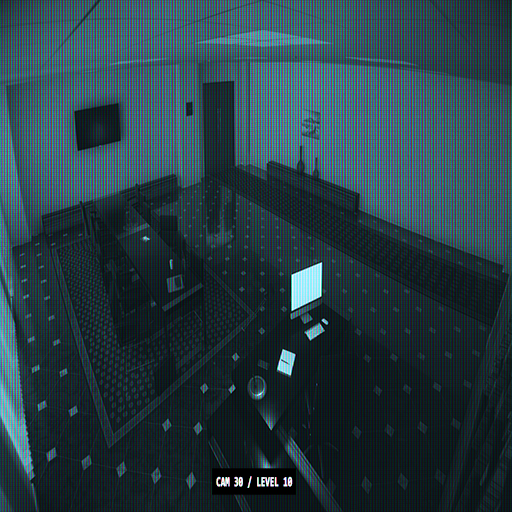
<style>
.page{position:relative;width:512px;height:512px}
.page>*{position:absolute;margin:0}
.t1{font:13.7px "Consolas-Bold";color:#ffffff;font-weight:bold;scale:0.56 1}
</style>
<div class="page">
<p class="t1" style="left:216px;top:476px;width:77px;height:12px">CAM 30 / LEVEL 10</p>
</div>
